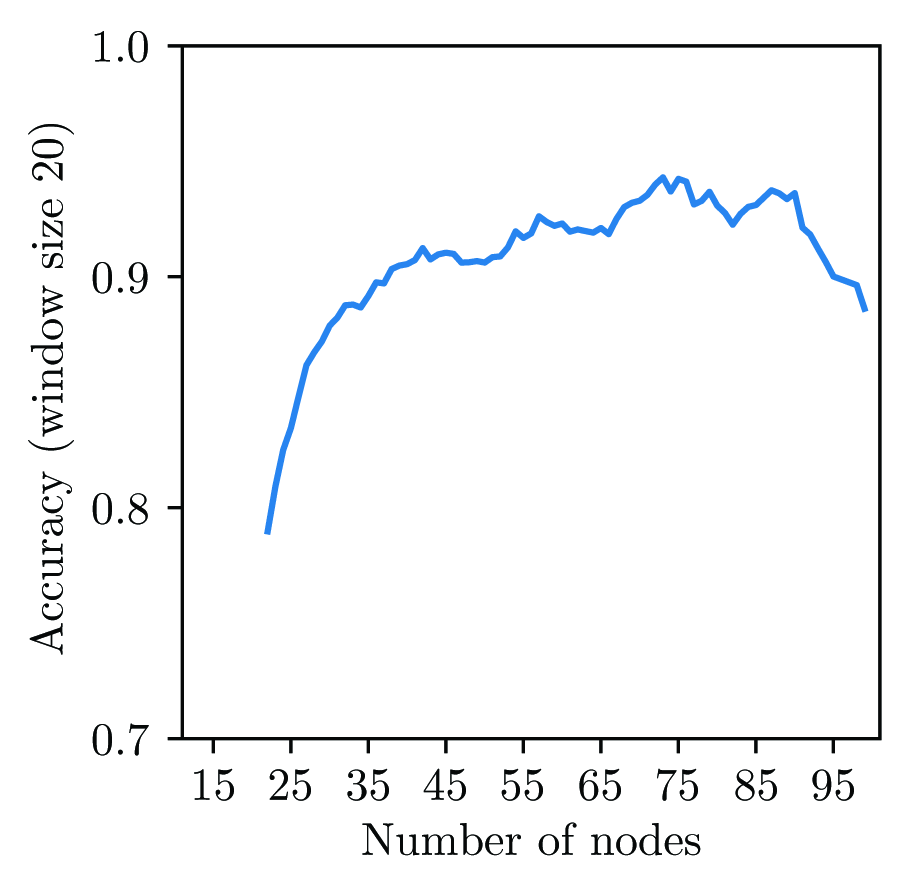
<style>
.page{position:relative;width:910px;height:895px;background:#ffffff}
.page>*{position:absolute;margin:0}
.t1{font:45.8px "CMUSerif-Roman";color:#060808}
</style>
<div class="page">
<p class="t1" style="left:94px;top:31px;width:54px;height:32px">1.0</p>
<p class="t1" style="left:28px;top:124px;width:46px;height:531px;rotate:-90deg">Accuracy (window size 20)</p>
<p class="t1" style="left:92px;top:262px;width:56px;height:32px">0.9</p>
<p class="t1" style="left:92px;top:493px;width:56px;height:32px">0.8</p>
<p class="t1" style="left:92px;top:723px;width:57px;height:33px">0.7</p>
<p class="t1" style="left:194px;top:768px;width:40px;height:33px">15</p>
<p class="t1" style="left:269px;top:768px;width:42px;height:33px">25</p>
<p class="t1" style="left:347px;top:768px;width:42px;height:33px">35</p>
<p class="t1" style="left:423px;top:768px;width:43px;height:33px">45</p>
<p class="t1" style="left:501px;top:768px;width:42px;height:33px">55</p>
<p class="t1" style="left:579px;top:768px;width:42px;height:33px">65</p>
<p class="t1" style="left:657px;top:768px;width:41px;height:33px">75</p>
<p class="t1" style="left:735px;top:768px;width:42px;height:33px">85</p>
<p class="t1" style="left:812px;top:768px;width:42px;height:33px">95</p>
<p class="t1" style="left:362px;top:822px;width:339px;height:34px">Number of nodes</p>
</div>
